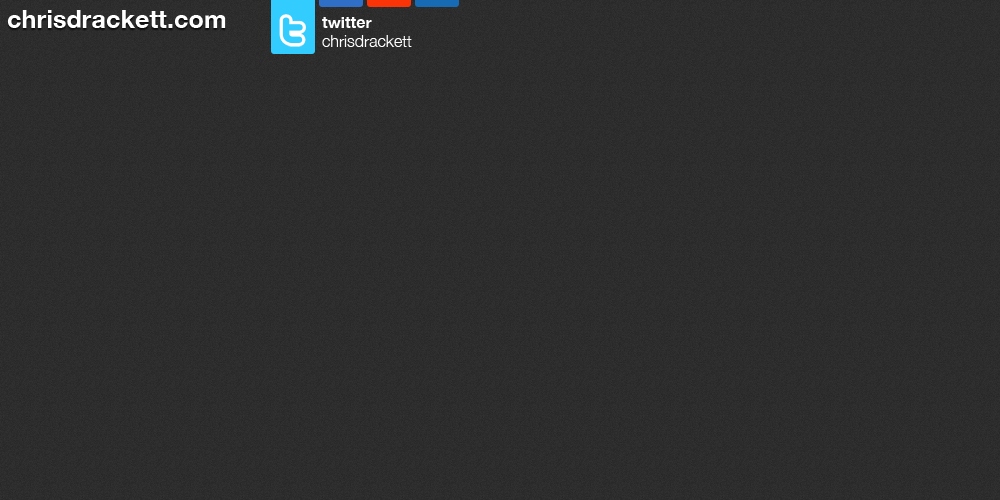
<style>
.page{position:relative;width:1000px;height:500px}
.page>*{position:absolute;margin:0}
.t1{font:25.2px "HelveticaNeue-Bold";color:#ffffff}
.t2{font:16.1px "HelveticaNeue-Bold";color:#fefefe}
.t3{font:16.1px "HelveticaNeue-Light";color:#fefefe}
</style>
<div class="page">
<p class="t1" style="left:7px;top:10px;width:219px;height:18px">chrisdrackett.com</p>
<p class="t2" style="left:322px;top:17px;width:50px;height:11px">twitter</p>
<p class="t3" style="left:322px;top:35px;width:90px;height:12px">chrisdrackett</p>
</div>
